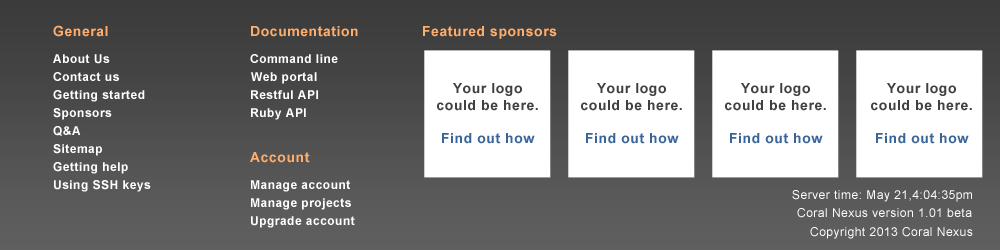
<style>
.page{position:relative;width:1000px;height:250px;background:#ffffff}
.page>*{position:absolute;margin:0}
.t1{font:14px "Arial-BoldMT";letter-spacing:0.04em;color:#ffad6c}
.t2{font:14px "Arial-BoldMT";letter-spacing:0.04em;color:#ffad6b}
.t3{font:12px "Arial-BoldMT";letter-spacing:0.04em;color:#ffffff}
.t4{font:14px "Arial-BoldMT";letter-spacing:0.04em;color:#404040}
.t5{font:14px "Arial-BoldMT";letter-spacing:0.04em;color:#3a6599}
.t6{font:12px "ArialMT";letter-spacing:0.04em;color:#ffffff}
</style>
<div class="page">
<p class="t1" style="left:53px;top:25px;width:55px;height:12px">General</p>
<p class="t2" style="left:251px;top:26px;width:107px;height:11px">Documentation</p>
<p class="t2" style="left:423px;top:26px;width:134px;height:13px">Featured sponsors</p>
<p class="t3" style="left:53px;top:54px;width:57px;height:10px">About Us</p>
<p class="t3" style="left:250px;top:54px;width:88px;height:9px">Command line</p>
<p class="t3" style="left:53px;top:72px;width:66px;height:9px">Contact us</p>
<p class="t3" style="left:251px;top:72px;width:66px;height:12px">Web portal</p>
<p class="t4" style="left:437px;top:83px;width:101px;height:61px;text-align:center">Your logo could be here.<br><br><span class="t5">Find out how</span></p>
<p class="t4" style="left:581px;top:83px;width:101px;height:61px;text-align:center">Your logo could be here.<br><br><span class="t5">Find out how</span></p>
<p class="t4" style="left:725px;top:83px;width:101px;height:61px;text-align:center">Your logo could be here.<br><br><span class="t5">Find out how</span></p>
<p class="t4" style="left:871px;top:83px;width:101px;height:61px;text-align:center">Your logo could be here.<br><br><span class="t5">Find out how</span></p>
<p class="t3" style="left:53px;top:90px;width:92px;height:12px">Getting started</p>
<p class="t3" style="left:251px;top:90px;width:67px;height:9px">Restful API</p>
<p class="t3" style="left:53px;top:108px;width:59px;height:12px">Sponsors</p>
<p class="t3" style="left:251px;top:108px;width:55px;height:12px">Ruby API</p>
<p class="t3" style="left:53px;top:126px;width:28px;height:10px">Q&amp;A</p>
<p class="t3" style="left:53px;top:144px;width:49px;height:12px">Sitemap</p>
<p class="t2" style="left:250px;top:152px;width:60px;height:11px">Account</p>
<p class="t3" style="left:53px;top:162px;width:75px;height:12px">Getting help</p>
<p class="t3" style="left:54px;top:180px;width:97px;height:12px">Using SSH keys</p>
<p class="t3" style="left:251px;top:180px;width:99px;height:12px">Manage account</p>
<p class="t3" style="left:251px;top:198px;width:100px;height:12px">Manage projects</p>
<p class="t6" style="left:792px;top:190px;width:180px;height:12px">Server time: May 21,4:04:35pm</p>
<p class="t6" style="left:797px;top:208px;width:175px;height:10px">Coral Nexus version 1.01 beta</p>
<p class="t3" style="left:251px;top:216px;width:104px;height:12px">Upgrade account</p>
<p class="t6" style="left:810px;top:227px;width:163px;height:12px">Copyright 2013 Coral Nexus</p>
</div>
